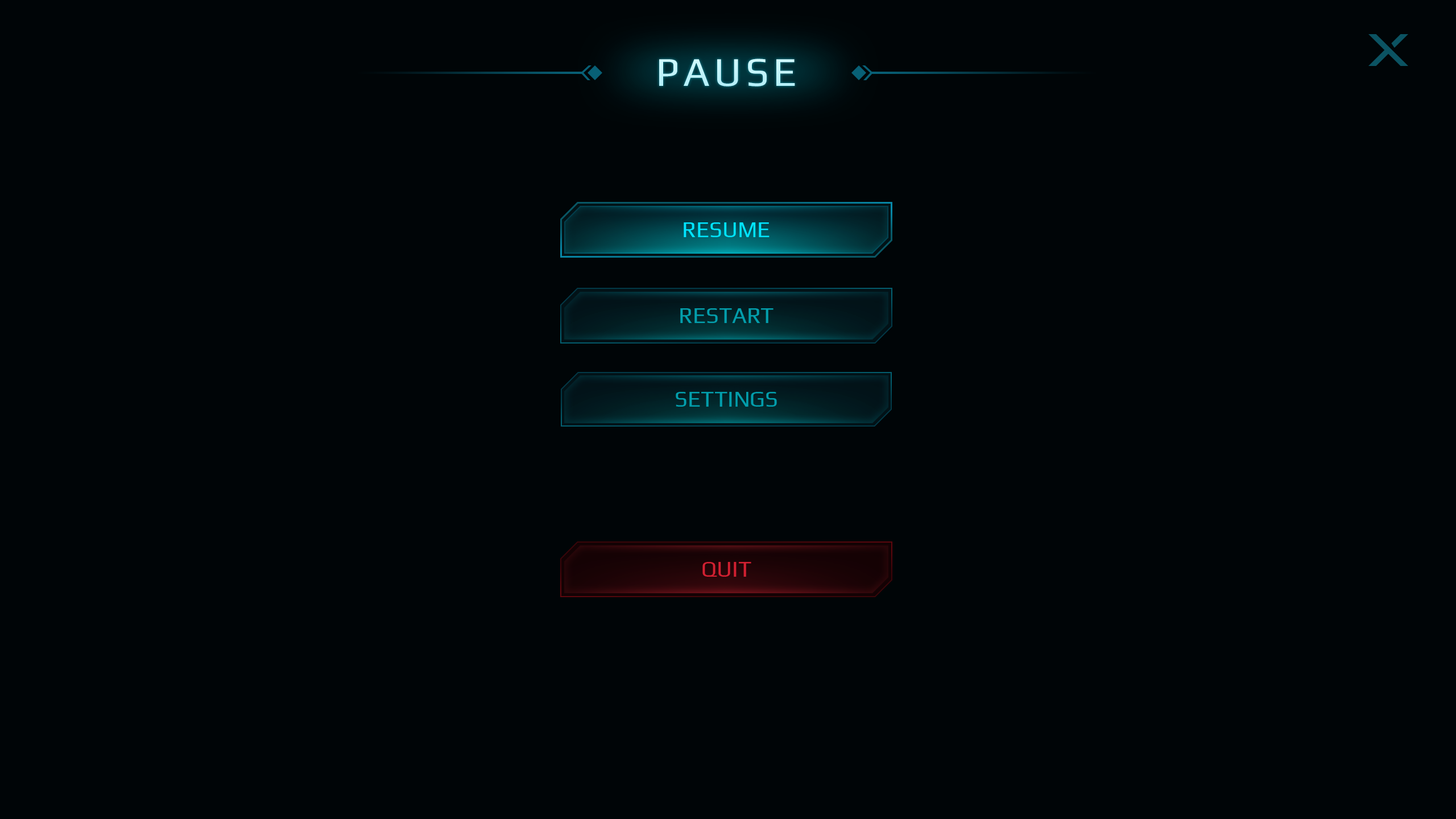
<style>
.page{position:relative;width:1456px;height:819px;background:#000507}
.page>*{position:absolute;margin:0}
.t1{font:40.9px "Play-Regular";letter-spacing:0.1em;color:#c2f4fc}
.t2{font:22.7px "Play-Regular";color:#01e4ff}
.t3{font:22.7px "Play-Regular";color:#039eac}
.t4{font:22.7px "Play-Regular";color:#029eac}
.t5{font:22.7px "Play-Regular";color:#d12031}
</style>
<div class="page">
<p class="t1" style="left:659px;top:59px;width:136px;height:27px">PAUSE</p>
<p class="t2" style="left:684px;top:222px;width:86px;height:15px">RESUME</p>
<p class="t3" style="left:680px;top:308px;width:93px;height:15px">RESTART</p>
<p class="t4" style="left:676px;top:392px;width:101px;height:15px">SETTINGS</p>
<p class="t5" style="left:702px;top:562px;width:49px;height:15px">QUIT</p>
</div>
